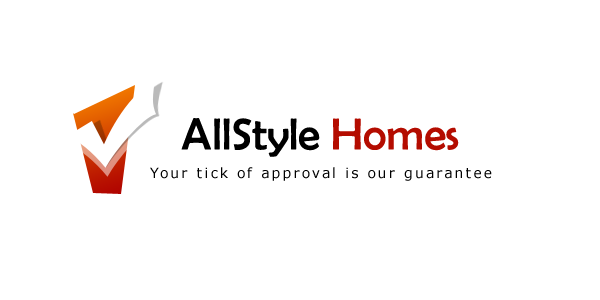
<style>
.page{position:relative;width:600px;height:300px;background:#ffffff}
.page>*{position:absolute;margin:0}
.t1{font:45px "BerlinSansFB-Reg";color:#000000}
.t2{font:45px "BerlinSansFB-Reg";color:#b40c00}
.t3{font:14px "Verdana";letter-spacing:0.15em;color:#000000}
</style>
<div class="page">
<p class="t1" style="left:181px;top:118px;width:278px;height:39px">AllStyle <span class="t2">Homes</span></p>
<p class="t3" style="left:150px;top:167px;width:342px;height:14px">Your tick of approval is our guarantee</p>
</div>
